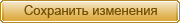
<style>
.page{position:relative;width:180px;height:23px}
.page>*{position:absolute;margin:0}
.t1{font:13px "ArialMT";color:#775100}
</style>
<div class="page">
<p class="t1" style="left:24px;top:5px;width:133px;height:13px">Сохранить изменения</p>
</div>
